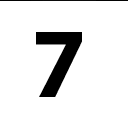
<style>
.page{position:relative;width:128px;height:128px;background:#ffffff}
.page>*{position:absolute;margin:0}
.t1{font:100px "MyriadHebrew-Bold";color:#000000}
</style>
<div class="page">
<p class="t1" style="left:36px;top:31px;width:46px;height:65px">7</p>
</div>
